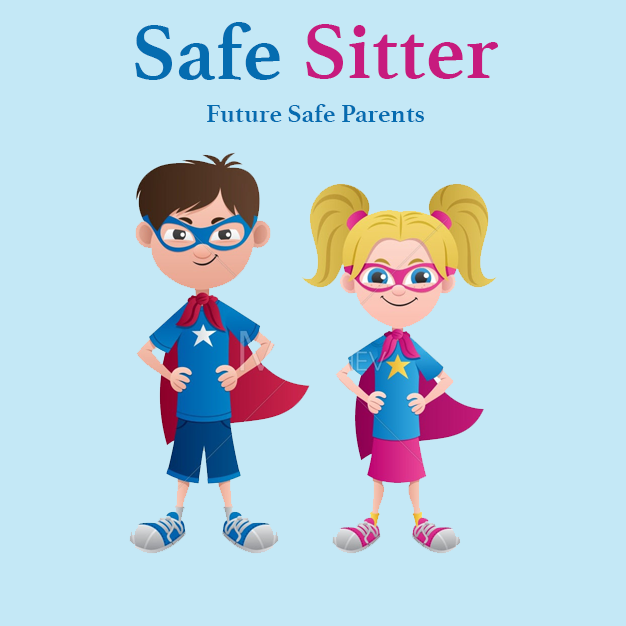
<style>
.page{position:relative;width:626px;height:626px;background:#c4e8f6}
.page>*{position:absolute;margin:0}
.t1{font:81px "Athelas-Bold";color:#056cb0}
.t2{font:81px "Athelas-Bold";color:#c71b7e}
.t3{font:26px "Athelas-Bold";color:#056cb0}
</style>
<div class="page">
<p class="t1" style="left:135px;top:22px;width:145px;height:58px">Safe</p>
<p class="t2" style="left:306px;top:24px;width:192px;height:55px">Sitter</p>
<p class="t3" style="left:207px;top:104px;width:217px;height:18px">Future Safe Parents</p>
</div>
